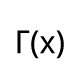
<style>
.page{position:relative;width:80px;height:80px;background:#ffffff}
.page>*{position:absolute;margin:0}
.t1{font:31.8px "DroidSans";color:#000000}
</style>
<div class="page">
<p class="t1" style="left:17px;top:30px;width:47px;height:29px">Г(x)</p>
</div>
